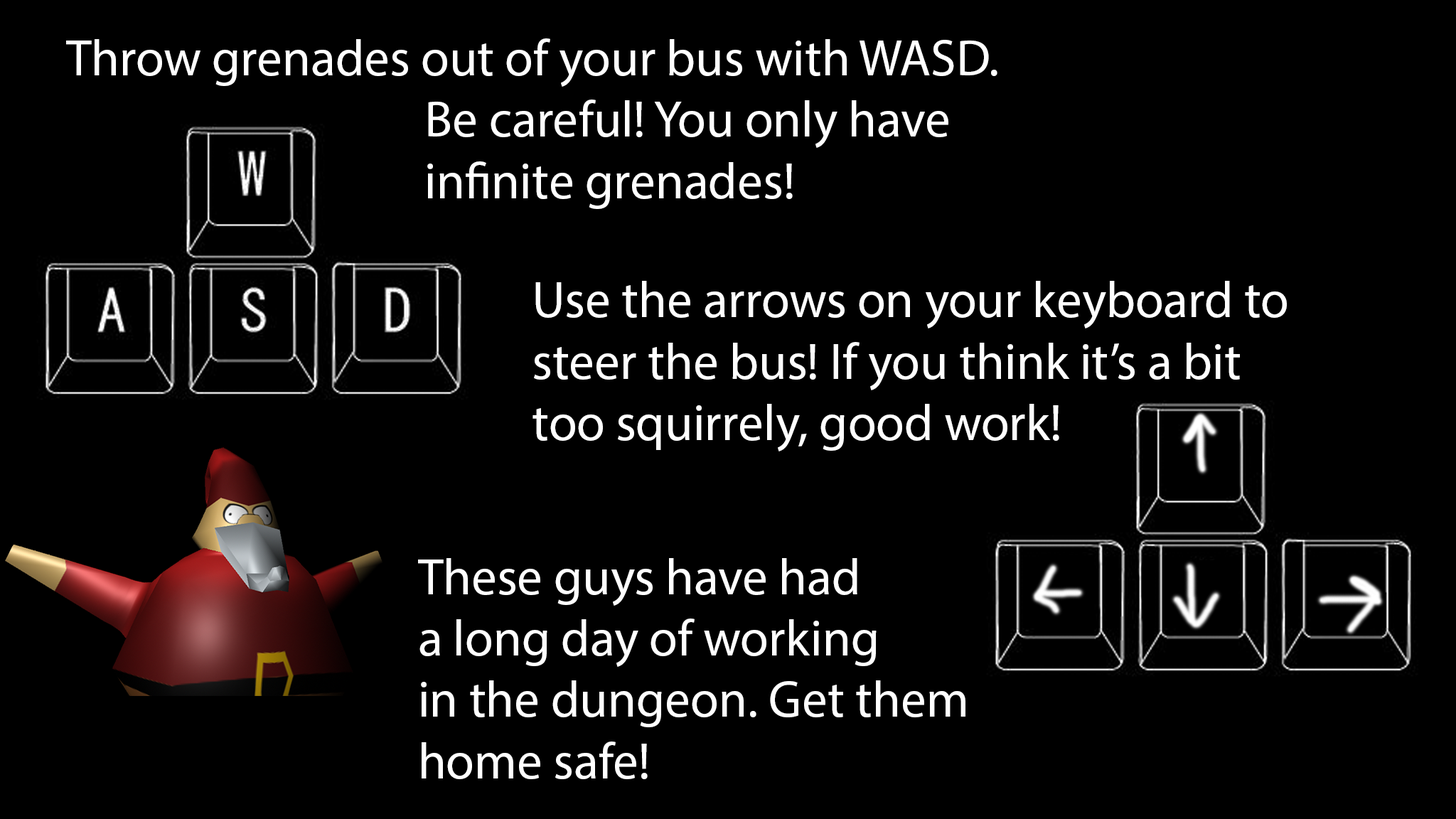
<style>
.page{position:relative;width:1456px;height:819px;background:#000000}
.page>*{position:absolute;margin:0}
.t1{font:51.2px "MyriadPro-Regular";color:#ffffff}
</style>
<div class="page">
<p class="t1" style="left:66px;top:38px;width:931px;height:171px">Throw grenades out of your bus with WASD.<br>              Be careful! You only have <br>              infinite grenades!</p>
<p class="t1" style="left:532px;top:281px;width:755px;height:170px">Use the arrows on your keyboard to <br>steer the bus! If you think it’s a bit<br>too squirrely, good work!</p>
<p class="t1" style="left:418px;top:558px;width:547px;height:221px">These guys have had<br>a long day of working<br>in the dungeon. Get them <br>home safe!</p>
</div>
